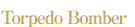
<style>
.page{position:relative;width:135px;height:27px;background:#ffffff}
.page>*{position:absolute;margin:0}
.t1{font:18px "RyuminPro-ExBold";letter-spacing:-0.08em;color:#c4a956}
</style>
<div class="page">
<p class="t1" style="left:0px;top:10px;width:127px;height:17px">Torpedo Bomber</p>
</div>
